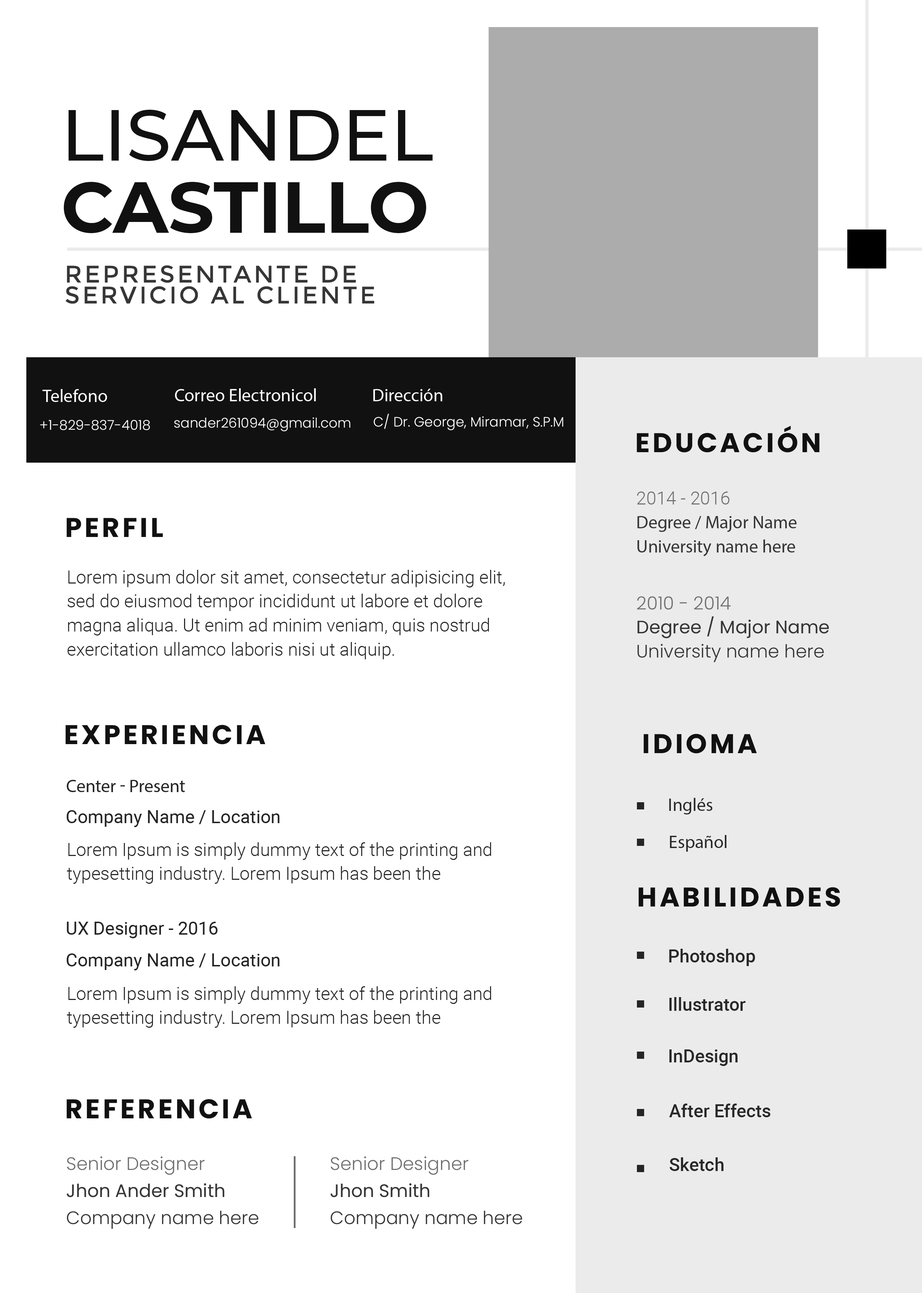
<style>
.page{position:relative;width:922px;height:1293px;background:#ffffff}
.page>*{position:absolute;margin:0}
.t1{font:72.2px/72.2px "Montserrat-Medium";color:#111111;text-transform:uppercase}
.t2{font:72.2px/72.2px "Montserrat-Bold";color:#111111;text-transform:uppercase}
.t3{font:24.1px/21.1px "Montserrat-Regular";letter-spacing:0.1em;color:#363636;text-transform:uppercase}
.t4{font:18px "Poppins-Regular";color:#ffffff}
.t5{font:13.5px "Poppins-Light";color:#ffffff}
.t6{font:27.1px "Poppins-Bold";letter-spacing:0.1em;color:#111111;text-transform:uppercase}
.t7{font:18px/24.1px "Poppins-Light";color:#363636}
.t8{font:18px/24.1px "Roboto-Light";color:#707070}
.t9{font:18px/24.1px "Poppins-Regular";color:#363636}
.t10{font:18px/24.1px "Roboto-Light";color:#252525}
.t11{font:18px/24.1px "Poppins-Light";color:#707070}
.t12{font:18px "Roboto-Regular";color:#252525}
.t13{font:18px "Roboto-Regular";color:#252525;text-transform:uppercase}
.t14{font:18px "Roboto-Medium";color:#282828}
.t15{font:18px/27.1px "Poppins-Light";color:#363636}
.t16{font:18px/27.1px "Poppins-Light";color:#707070}
.t17{font:18px/27.1px "Poppins-Regular";color:#363636}
</style>
<div class="page">
<p class="t1" style="left:64px;top:110px;width:369px;height:123px">Lisandel<br><span class="t2">Castillo</span></p>
<p class="t3" style="left:65px;top:265px;width:309px;height:39px">Representante de<br>servicio al cliente</p>
<p class="t4" style="left:42px;top:389px;width:65px;height:13px">Telefono</p>
<p class="t4" style="left:175px;top:388px;width:141px;height:13px">Correo Electronicol</p>
<p class="t4" style="left:373px;top:389px;width:69px;height:12px">Dirección</p>
<p class="t5" style="left:374px;top:414px;width:189px;height:16px">C/ Dr. George, Miramar, S.P.M</p>
<p class="t5" style="left:40px;top:420px;width:110px;height:10px">+1-829-837-4018</p>
<p class="t5" style="left:174px;top:417px;width:176px;height:14px">sander261094@gmail.com</p>
<p class="t6" style="left:637px;top:426px;width:183px;height:27px">Educación</p>
<p class="t7" style="left:637px;top:492px;width:160px;height:65px"><span class="t8">2014 - 2016<br></span><span class="t9">Degree / Major Name<br></span>University name here</p>
<p class="t6" style="left:66px;top:518px;width:97px;height:19px">perfil</p>
<p class="t10" style="left:67px;top:570px;width:438px;height:89px">Lorem ipsum dolor sit amet, consectetur adipisicing elit, sed do eiusmod tempor incididunt ut labore et dolore magna aliqua. Ut enim ad minim veniam, quis nostrud exercitation ullamco laboris nisi ut aliquip.</p>
<p class="t7" style="left:637px;top:596px;width:192px;height:66px"><span class="t11">2010 - 2014<br></span><span class="t9">Degree / Major Name<br></span>University name here</p>
<p class="t6" style="left:65px;top:725px;width:201px;height:20px">experiencia</p>
<p class="t6" style="left:644px;top:734px;width:113px;height:20px">Idioma</p>
<p class="t12" style="left:67px;top:780px;width:118px;height:12px">Center<span class="t13"> - </span>Present</p>
<p class="t14" style="left:669px;top:798px;width:43px;height:17px">Inglés</p>
<p class="t12" style="left:66px;top:810px;width:214px;height:17px">Company Name / Location</p>
<p class="t10" style="left:67px;top:842px;width:424px;height:42px">Lorem Ipsum is simply dummy text of the printing and typesetting industry. Lorem Ipsum has been the</p>
<p class="t14" style="left:670px;top:835px;width:57px;height:17px">Español</p>
<p class="t6" style="left:638px;top:887px;width:202px;height:20px">Habilidades</p>
<p class="t12" style="left:67px;top:922px;width:151px;height:16px">UX Designer<span class="t13"> - 2016</span></p>
<p class="t12" style="left:66px;top:954px;width:214px;height:16px">Company Name / Location</p>
<p class="t14" style="left:669px;top:949px;width:86px;height:17px">Photoshop</p>
<p class="t10" style="left:67px;top:986px;width:424px;height:42px">Lorem Ipsum is simply dummy text of the printing and typesetting industry. Lorem Ipsum has been the</p>
<p class="t14" style="left:669px;top:997px;width:77px;height:14px">Illustrator</p>
<p class="t14" style="left:669px;top:1050px;width:69px;height:16px">InDesign</p>
<p class="t6" style="left:66px;top:1099px;width:186px;height:20px">referencia</p>
<p class="t14" style="left:669px;top:1104px;width:102px;height:13px">After Effects</p>
<p class="t15" style="left:67px;top:1156px;width:191px;height:73px"><span class="t16">Senior Designer<br></span><span class="t17">Jhon Ander Smith<br></span>Company name here</p>
<p class="t15" style="left:331px;top:1156px;width:191px;height:73px"><span class="t16">Senior Designer<br></span><span class="t17">Jhon Smith<br></span>Company name here</p>
<p class="t14" style="left:669px;top:1157px;width:55px;height:14px">Sketch</p>
</div>
